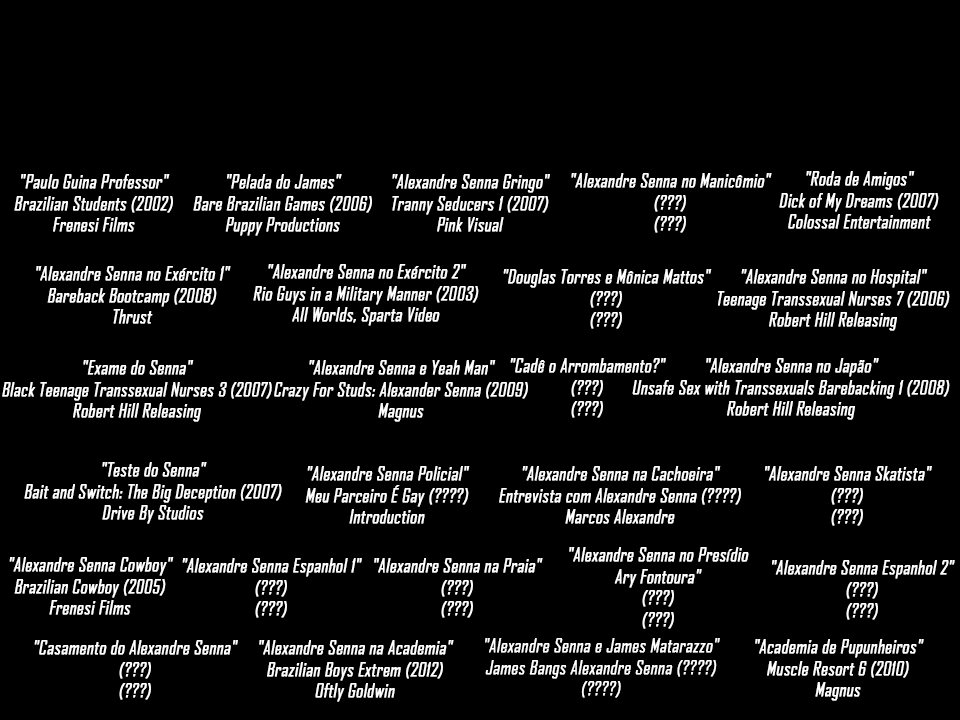
<style>
.page{position:relative;width:960px;height:720px;background:#000000}
.page>*{position:absolute;margin:0}
.t1{font:18px "AgencyFB-Reg";color:#ffffff;font-weight:bold;font-style:italic}
.t2{font:18.1px "AgencyFB-Reg";color:#ffffff;font-weight:bold;font-style:italic}
</style>
<div class="page">
<p class="t1" style="left:14px;top:174px;width:159px;height:58px;text-align:center">"Paulo Guina Professor"<br>Brazilian Students (2002)<br>Frenesi Films</p>
<p class="t1" style="left:193px;top:174px;width:179px;height:62px;text-align:center">"Pelada do James"<br>Bare Brazilian Games (2006)<br>Puppy Productions</p>
<p class="t1" style="left:392px;top:174px;width:158px;height:58px;text-align:center">"Alexandre Senna Gringo"<br>Tranny Seducers 1 (2007)<br>Pink Visual</p>
<p class="t2" style="left:571px;top:173px;width:201px;height:60px;text-align:center">"Alexandre Senna no Manicômio"<br>(???)<br>(???)</p>
<p class="t2" style="left:779px;top:171px;width:160px;height:58px;text-align:center">"Roda de Amigos"<br>Dick of My Dreams (2007)<br>Colossal Entertainment</p>
<p class="t2" style="left:36px;top:266px;width:195px;height:58px;text-align:center">"Alexandre Senna no Exército 1"<br>Bareback Bootcamp (2008)<br>Thrust</p>
<p class="t2" style="left:253px;top:264px;width:226px;height:62px;text-align:center">"Alexandre Senna no Exército 2"<br>Rio Guys in a Military Manner (2003)<br>All Worlds, Sparta Video</p>
<p class="t2" style="left:503px;top:269px;width:209px;height:60px;text-align:center">"Douglas Torres e Mônica Mattos"<br>(???)<br>(???)</p>
<p class="t2" style="left:718px;top:269px;width:232px;height:62px;text-align:center">"Alexandre Senna no Hospital"<br>Teenage Transsexual Nurses 7 (2006)<br>Robert Hill Releasing</p>
<p class="t2" style="left:2px;top:360px;width:270px;height:62px;text-align:center">"Exame do Senna"<br>Black Teenage Transsexual Nurses 3 (2007)<br>Robert Hill Releasing</p>
<p class="t2" style="left:274px;top:360px;width:254px;height:62px;text-align:center">"Alexandre Senna e Yeah Man"<br>Crazy For Studs: Alexander Senna (2009)<br>Magnus</p>
<p class="t2" style="left:510px;top:358px;width:156px;height:60px;text-align:center">"Cadê o Arrombamento?"<br>(???)<br>(???)</p>
<p class="t2" style="left:632px;top:358px;width:318px;height:62px;text-align:center">"Alexandre Senna no Japão"<br>Unsafe Sex with Transsexuals Barebacking 1 (2008)<br>Robert Hill Releasing</p>
<p class="t2" style="left:24px;top:462px;width:258px;height:62px;text-align:center">"Teste do Senna"<br>Bait and Switch: The Big Deception (2007)<br>Drive By Studios</p>
<p class="t2" style="left:305px;top:466px;width:165px;height:58px;text-align:center">"Alexandre Senna Policial"<br>Meu Parceiro É Gay (????)<br>Introduction</p>
<p class="t2" style="left:499px;top:466px;width:242px;height:58px;text-align:center">"Alexandre Senna na Cachoeira"<br>Entrevista com Alexandre Senna (????)<br>Marcos Alexandre</p>
<p class="t2" style="left:765px;top:466px;width:167px;height:60px;text-align:center">"Alexandre Senna Skatista"<br>(???)<br>(???)</p>
<p class="t2" style="left:9px;top:557px;width:165px;height:58px;text-align:center">"Alexandre Senna Cowboy"<br>Brazilian Cowboy (2005)<br>Frenesi Films</p>
<p class="t2" style="left:182px;top:558px;width:180px;height:60px;text-align:center">"Alexandre Senna Espanhol 1"<br>(???)<br>(???)</p>
<p class="t2" style="left:374px;top:558px;width:169px;height:60px;text-align:center">"Alexandre Senna na Praia"<br>(???)<br>(???)</p>
<p class="t2" style="left:569px;top:547px;width:180px;height:82px;text-align:center">"Alexandre Senna no Presídio<br>Ary Fontoura"<br>(???)<br>(???)</p>
<p class="t2" style="left:772px;top:560px;width:183px;height:60px;text-align:center">"Alexandre Senna Espanhol 2"<br>(???)<br>(???)</p>
<p class="t2" style="left:34px;top:640px;width:204px;height:60px;text-align:center">"Casamento do Alexandre Senna"<br>(???)<br>(???)</p>
<p class="t2" style="left:259px;top:640px;width:195px;height:62px;text-align:center">"Alexandre Senna na Academia"<br>Brazilian Boys Extrem (2012)<br>Oftly Goldwin</p>
<p class="t2" style="left:485px;top:638px;width:235px;height:60px;text-align:center">"Alexandre Senna e James Matarazzo"<br>James Bangs Alexandre Senna (????)<br>(????)</p>
<p class="t2" style="left:755px;top:639px;width:169px;height:62px;text-align:center">"Academia de Pupunheiros"<br>Muscle Resort 6 (2010)<br>Magnus</p>
</div>
